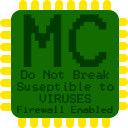
<style>
.page{position:relative;width:128px;height:128px;background:#126c00}
.page>*{position:absolute;margin:0}
.t1{font:10px "Terminal";color:#003b01}
.t2{font:60px "Terminal";color:#003b01}
.t3{font:8px "Terminal";color:#003b01}
</style>
<div class="page">
<p class="t1" style="left:17px;top:14px;width:97px;height:99px;text-align:center"><span class="t2">MC<br></span>Do Not Break<br>Suseptible to<br>VIRUSES<br><span class="t3">Firewall Enabled</span></p>
</div>
